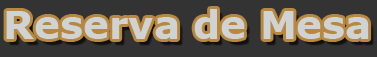
<style>
.page{position:relative;width:377px;height:57px;background:#333333}
.page>*{position:absolute;margin:0}
.t1{font:39px "Verdana-Bold";color:#d0d3d4}
</style>
<div class="page">
<p class="t1" style="left:6px;top:9px;width:363px;height:30px">Reserva de Mesa</p>
</div>
